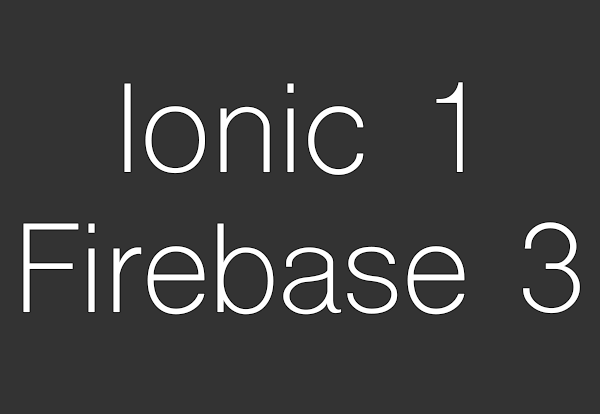
<style>
.page{position:relative;width:600px;height:414px;background:#333333}
.page>*{position:absolute;margin:0}
.t1{font:120px/140px "ShreeDev0714";color:#ffffff}
</style>
<div class="page">
<p class="t1" style="left:23px;top:82px;width:557px;height:233px;text-align:center">Ionic 1<br>Firebase 3</p>
</div>
